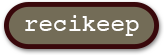
<style>
.page{position:relative;width:165px;height:55px;background:#736c57}
.page>*{position:absolute;margin:0}
.t1{font:24px "Courier";color:#ffffff}
</style>
<div class="page">
<p class="t1" style="left:25px;top:15px;width:114px;height:21px">recikeep</p>
</div>
